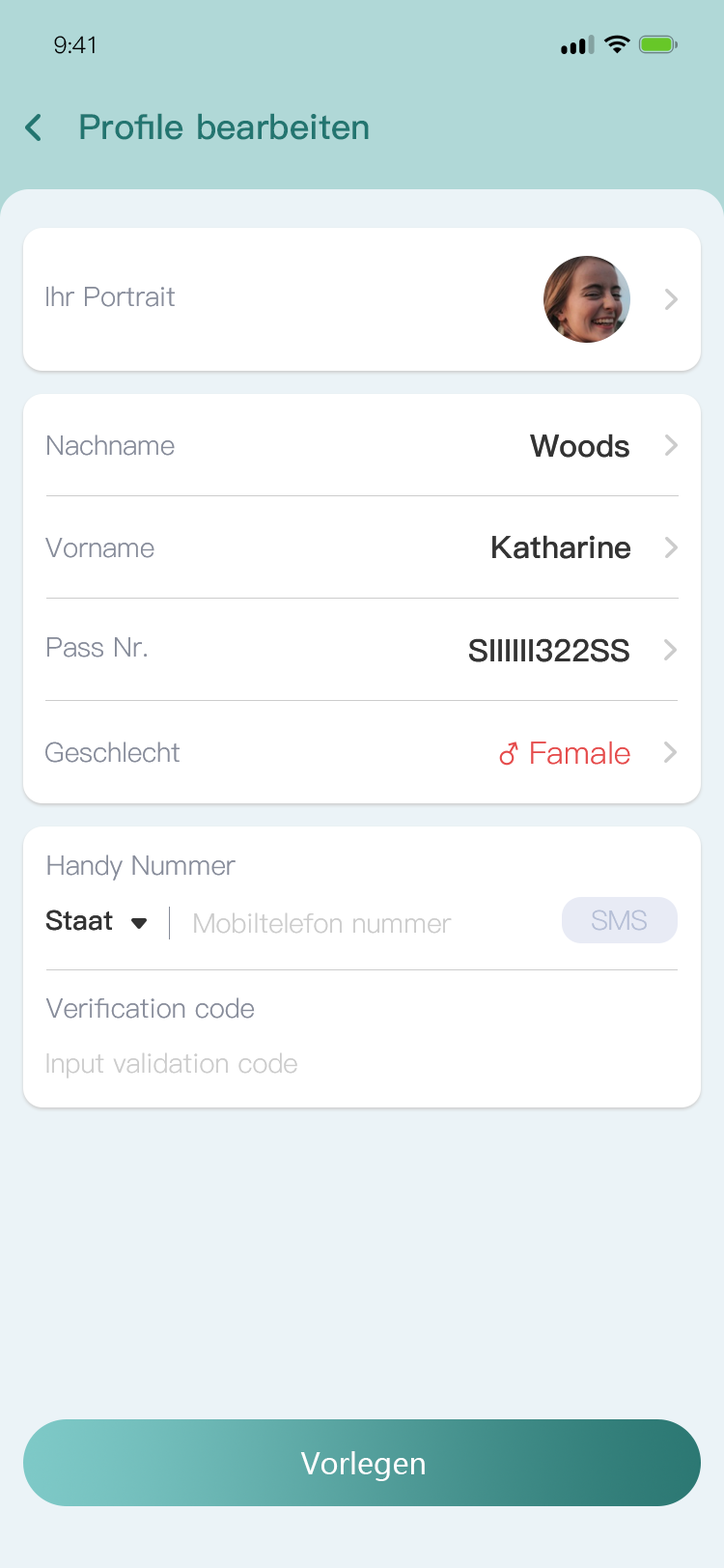
<style>
.page{position:relative;width:724px;height:1568px;background:#ffffff}
.page>*{position:absolute;margin:0}
.t1{font:23.2px "PingFang-SC-Regular";letter-spacing:-0.025em;color:#000000}
.t2{font:34.8px "PingFang-SC-Bold";color:#237570}
.t3{font:27px "PingFang-SC-Regular";color:#878c9a}
.t4{font:30.9px "PingFang-SC-Bold";color:#333333}
.t5{font:30.9px "PingFang-SC-Bold";color:#333333;text-transform:uppercase}
.t6{font:30.9px "PingFang-SC-Regular";color:#e54b4b}
.t7{font:27px "PingFang-SC-Bold";color:#333333}
.t8{font:27px "PingFang-SC-Regular";color:#cccccc}
.t9{font:27px "PingFang-SC-Regular";color:#b6bfd6;text-transform:uppercase}
.t10{font:27px "PingFang-SC-Regular";color:#878c9a;text-transform:uppercase}
.t11{font:29px "MicrosoftYaHei";color:#ffffff}
</style>
<div class="page">
<p class="t1" style="left:54px;top:36px;width:41px;height:18px">9:41</p>
<p class="t2" style="left:80px;top:113px;width:289px;height:27px">Profile bearbeiten</p>
<p class="t3" style="left:46px;top:286px;width:129px;height:21px">Ihr Portrait</p>
<p class="t3" style="left:47px;top:434px;width:128px;height:22px">Nachname</p>
<p class="t4" style="left:530px;top:434px;width:100px;height:24px"><span class="t5">W</span>oods</p>
<p class="t3" style="left:45px;top:538px;width:109px;height:20px">Vorname</p>
<p class="t4" style="left:492px;top:535px;width:139px;height:24px"><span class="t5">K</span>atharine</p>
<p class="t3" style="left:47px;top:637px;width:100px;height:21px">Pass Nr.</p>
<p class="t5" style="left:469px;top:638px;width:161px;height:24px">SIIIIII322SS</p>
<p class="t3" style="left:45px;top:742px;width:135px;height:21px">Geschlecht</p>
<p class="t6" style="left:531px;top:741px;width:99px;height:24px">Famale</p>
<p class="t3" style="left:47px;top:854px;width:189px;height:27px">Handy Nummer</p>
<p class="t7" style="left:45px;top:910px;width:68px;height:21px">Staat</p>
<p class="t8" style="left:194px;top:912px;width:258px;height:22px">Mobiltelefon nummer</p>
<p class="t9" style="left:592px;top:910px;width:55px;height:21px">SMS</p>
<p class="t3" style="left:45px;top:997px;width:210px;height:22px"><span class="t10">v</span>erification code</p>
<p class="t8" style="left:46px;top:1052px;width:251px;height:26px">Input validation code</p>
<p class="t11" style="left:300px;top:1451px;width:125px;height:30px">Vorlegen</p>
</div>
